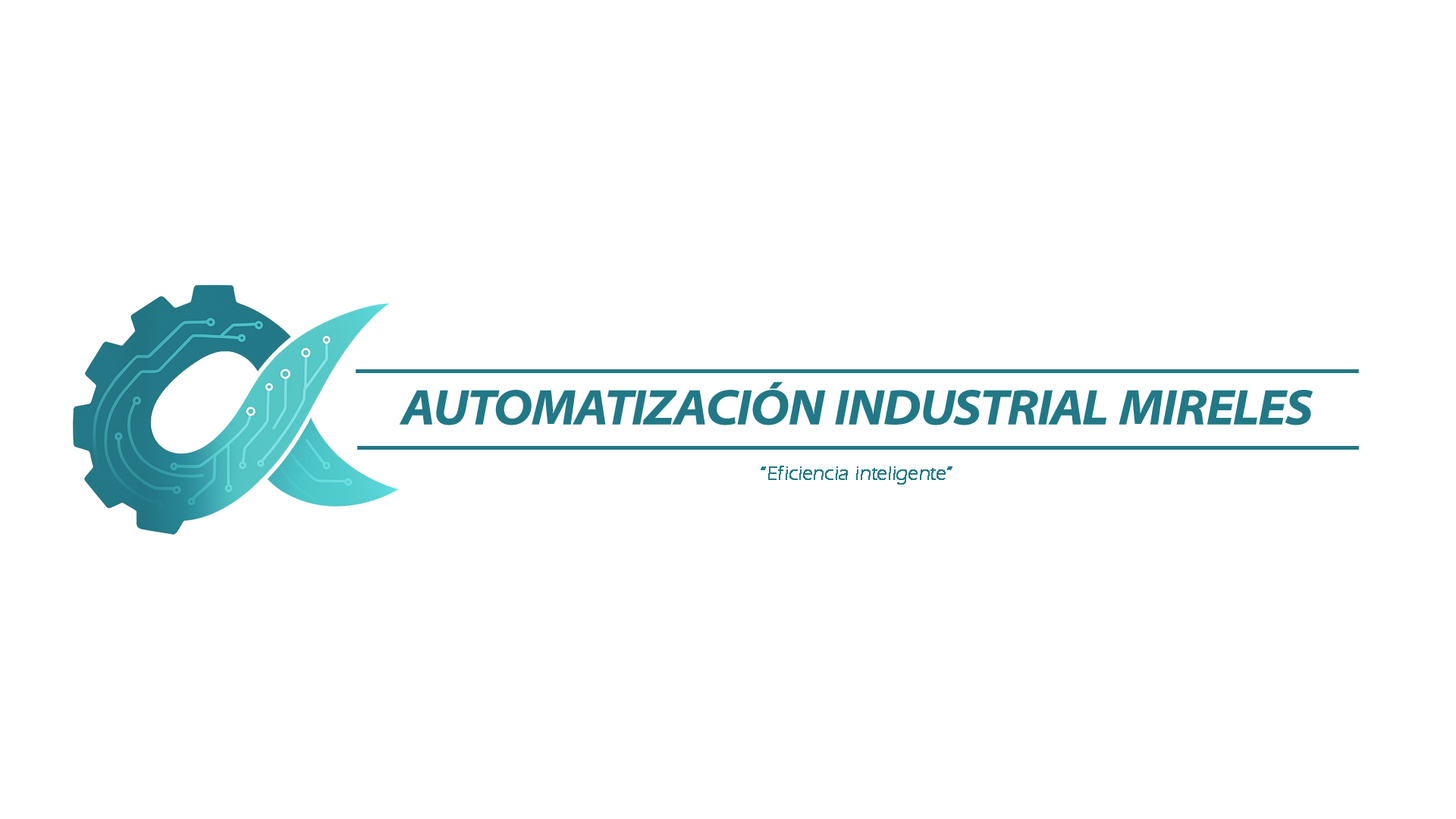
<style>
.page{position:relative;width:1456px;height:819px;background:#ffffff}
.page>*{position:absolute;margin:0}
.t1{font:50.1px "MyriadConceptItalic-BoldSemiExtendedItalic";color:#227886;text-transform:uppercase}
.t2{font:19.7px "ErasITC-Light";color:#227886;font-weight:bold}
</style>
<div class="page">
<p class="t1" style="left:399px;top:381px;width:914px;height:44px">AUTOMATIZACIÓN INDUSTRIAL MIRELES</p>
<p class="t2" style="left:761px;top:466px;width:191px;height:19px">“Eficiencia inteligente”</p>
</div>
